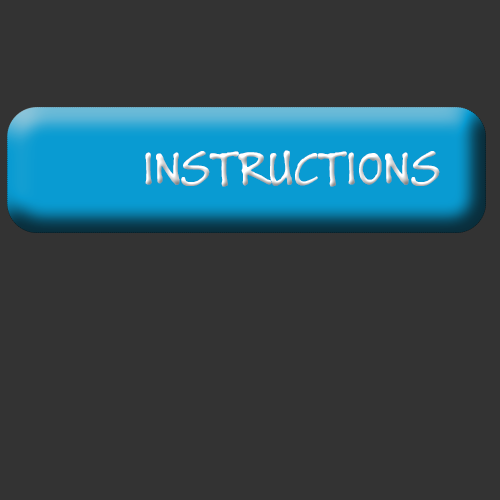
<style>
.page{position:relative;width:500px;height:500px;background:#333333}
.page>*{position:absolute;margin:0}
.t1{font:52.9px "BuxtonSketch"}
.t2{font:52.9px "CopperplateGothic-Light"}
</style>
<div class="page">
<p class="t1" style="left:145px;top:150px;width:295px;height:37px"><span class="t2">        </span>INSTRUCTIONS</p>
</div>
